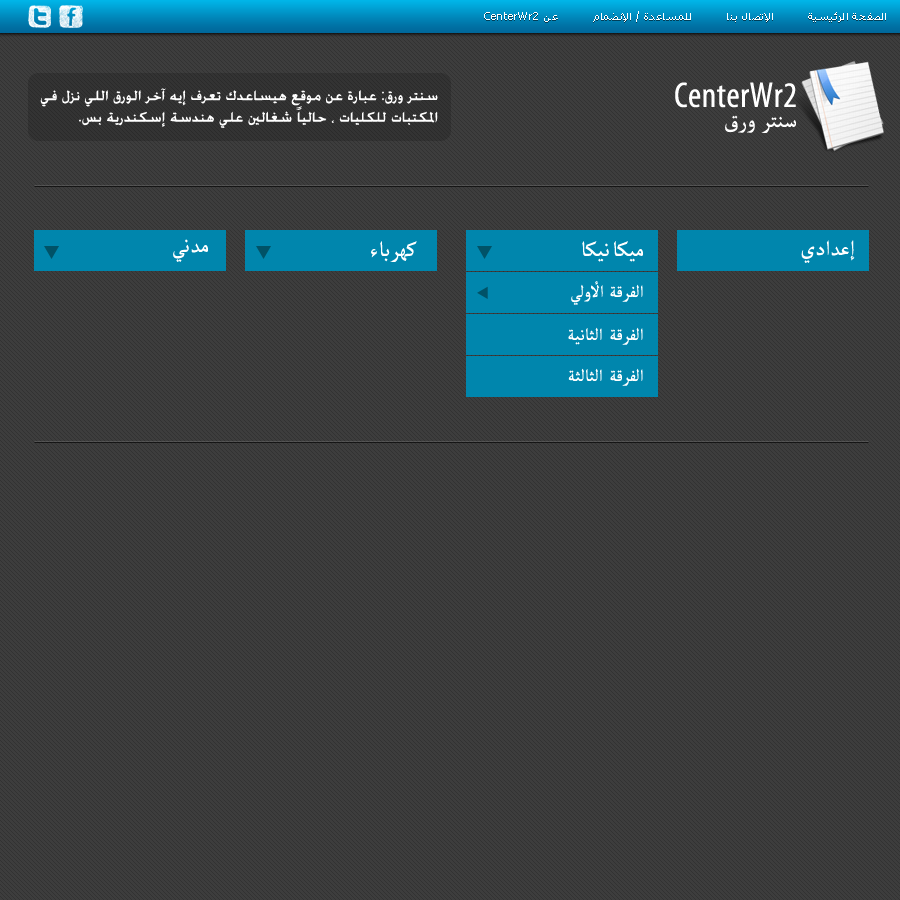
<style>
.page{position:relative;width:900px;height:900px;background:#3d3d3d}
.page>*{position:absolute;margin:0}
.t1{font:11.3px "Tahoma";letter-spacing:0.015em;color:#ffffff}
.t2{font:18px "MyriadPro-Cond";letter-spacing:0.015em;color:#ffffff}
.t3{font:36px "MyriadPro-Cond";letter-spacing:0.015em;color:#ffffff}
.t4{font:30px "MicrosoftUighur";letter-spacing:0.015em;color:#ffffff}
.t5{font:24px "MicrosoftUighur";letter-spacing:0.015em;color:#ffffff}
</style>
<div class="page">
<p class="t1" style="left:484px;top:11px;width:402px;height:11px">الصفحة الرئيسية         الإتصال بنا         للمساعدة / الإنضمام         عن CenterWr2</p>
<p class="t2" style="left:40px;top:88px;width:398px;height:40px">سنتر ورق: عبارة عن موقع هيساعدك تعرف إيه آخر الورق اللي نزل في<br>المكتبات للكليات ، حالياً شغالين علي هندسة إسكندرية بس.</p>
<p class="t3" style="left:675px;top:82px;width:121px;height:26px">CenterWr2</p>
<p class="t4" style="left:725px;top:115px;width:71px;height:18px">سنتر ورق</p>
<p class="t4" style="left:173px;top:239px;width:35px;height:23px">مدني</p>
<p class="t4" style="left:371px;top:241px;width:46px;height:21px">كهرباء</p>
<p class="t4" style="left:582px;top:241px;width:61px;height:21px">ميكانيكا</p>
<p class="t4" style="left:801px;top:240px;width:54px;height:23px">إعدادي</p>
<p class="t5" style="left:571px;top:281px;width:72px;height:24px">الفرقة الأولي</p>
<p class="t5" style="left:568px;top:327px;width:75px;height:18px">الفرقة الثانية</p>
<p class="t5" style="left:568px;top:368px;width:75px;height:18px">الفرقة الثالثة</p>
</div>
